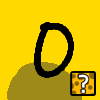
<style>
.page{position:relative;width:100px;height:100px;background:#ffd900}
.page>*{position:absolute;margin:0}
.t1{font:80.1px "InkFree";color:#000000}
</style>
<div class="page">
<p class="t1" style="left:35px;top:23px;width:38px;height:54px">0</p>
</div>
